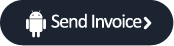
<style>
.page{position:relative;width:174px;height:46px;background:#1c2431}
.page>*{position:absolute;margin:0}
.t1{font:20px "Calibri";letter-spacing:-0.05em;color:#ffffff}
</style>
<div class="page">
<p class="t1" style="left:51px;top:13px;width:91px;height:15px">Send Invoice</p>
</div>
